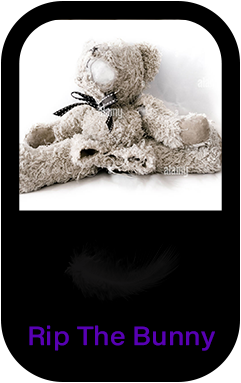
<style>
.page{position:relative;width:241px;height:383px;background:#000000}
.page>*{position:absolute;margin:0}
.t1{font:26.3px "AcuminConcept-Medium";color:#5800b3;scale:1.11 1}
</style>
<div class="page">
<p class="t1" style="left:29px;top:325px;width:186px;height:26px">Rip The Bunny</p>
</div>
